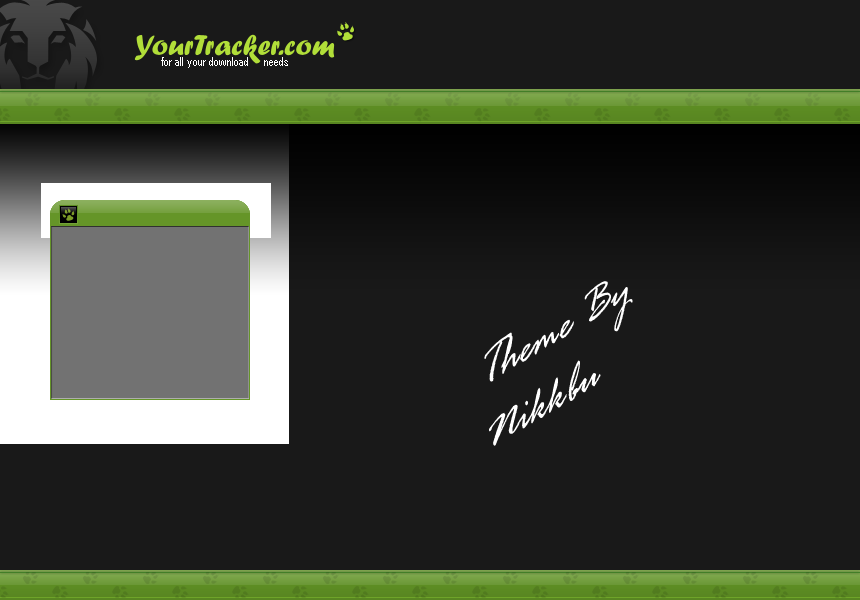
<style>
.page{position:relative;width:860px;height:600px;background:#191919}
.page>*{position:absolute;margin:0}
.t1{font:12px "ArialNarrow";color:#ffffff}
.t2{font:52.8px "RageItalic";color:#ffffff;scale:0.91 1}
</style>
<div class="page">
<p class="t1" style="left:161px;top:57px;width:127px;height:11px">for all your download     needs</p>
<p class="t2" style="left:484px;top:281px;width:149px;height:165px;rotate:-31deg">Theme By<br>Nikkbu</p>
</div>
